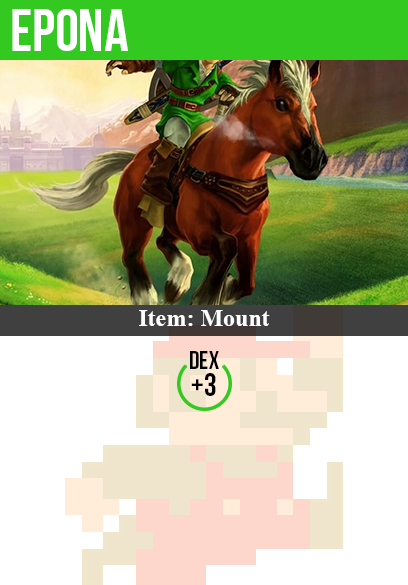
<style>
.page{position:relative;width:408px;height:585px;background:#ffffff}
.page>*{position:absolute;margin:0}
.t1{font:60px "BebasNeue";color:#ffffff}
.t2{font:24px "TimesNewRomanPS-BoldMT";color:#ffffff}
.t3{font:25px "BebasNeue";color:#000000}
.t4{font:32px "BebasNeue";color:#000000}
</style>
<div class="page">
<p class="t1" style="left:12px;top:9px;width:116px;height:42px">epona</p>
<p class="t2" style="left:139px;top:310px;width:131px;height:16px">Item: Mount</p>
<p class="t3" style="left:190px;top:351px;width:29px;height:18px">dex</p>
<p class="t4" style="left:191px;top:373px;width:25px;height:23px">+3</p>
</div>
